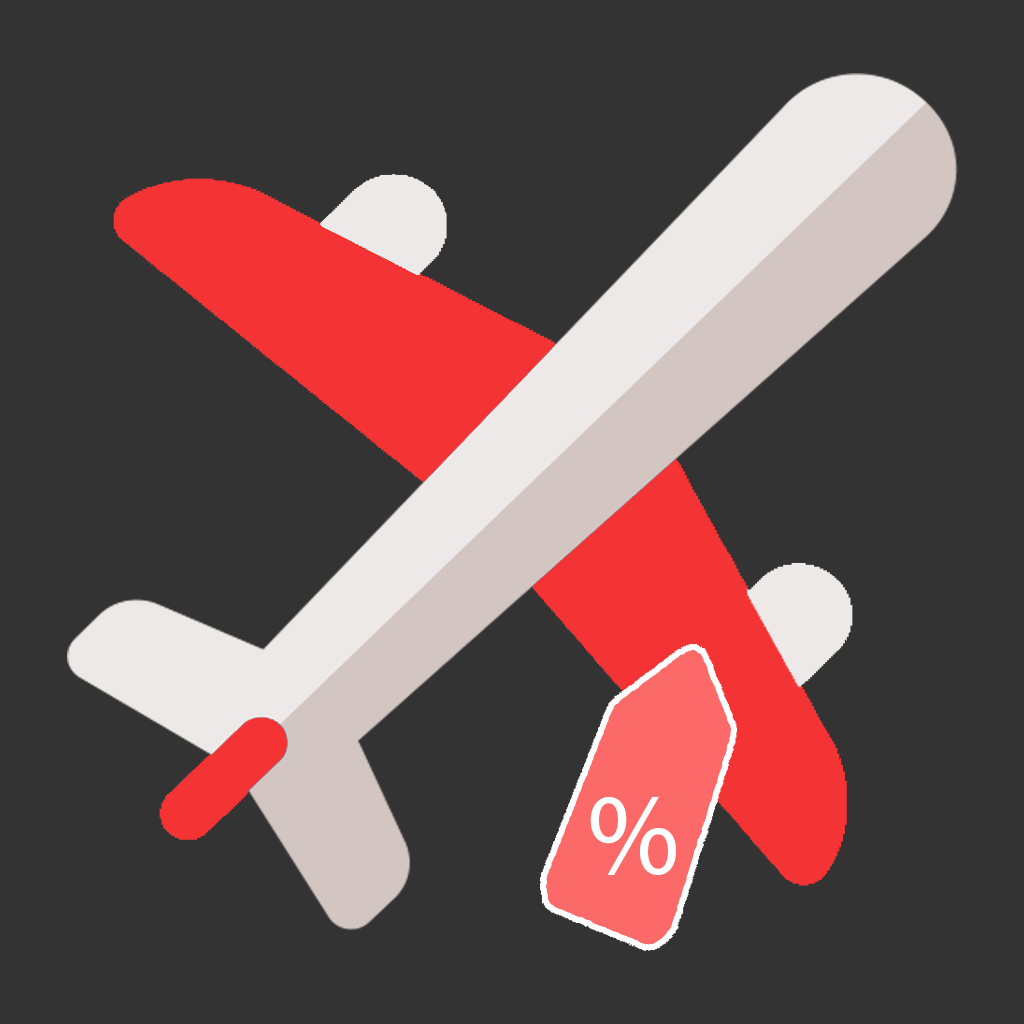
<style>
.page{position:relative;width:1024px;height:1024px;background:#333333}
.page>*{position:absolute;margin:0}
.t1{font:116.9px "MyriadPro-Regular";color:#ffffff}
</style>
<div class="page">
<p class="t1" style="left:590px;top:796px;width:86px;height:79px">%</p>
</div>
